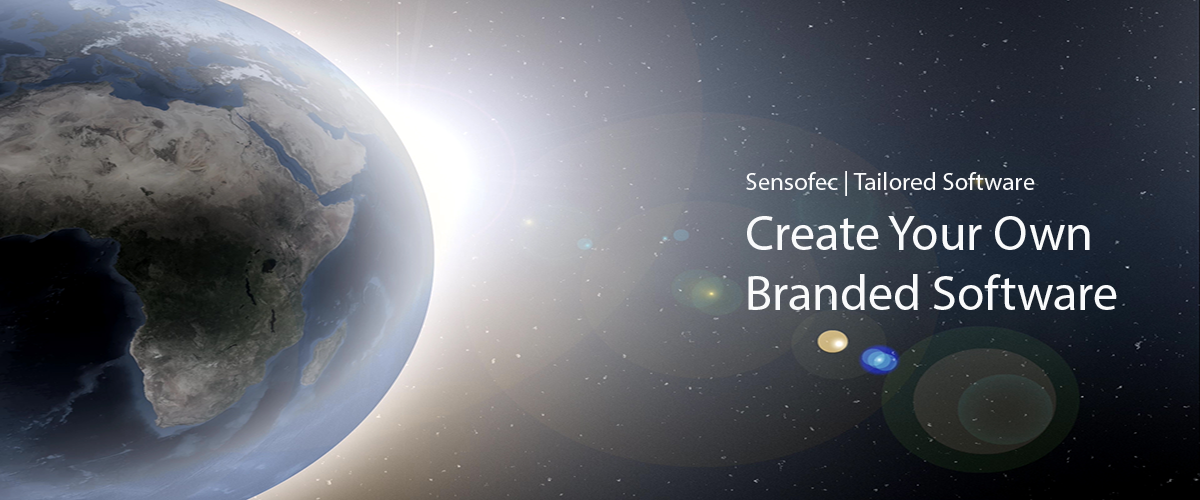
<style>
.page{position:relative;width:1200px;height:500px}
.page>*{position:absolute;margin:0}
.t1{font:50px "MyriadPro-Regular";color:#f9fafb}
.t2{font:12px "MyriadPro-Regular";color:#f9fafb}
</style>
<div class="page">
<p class="t1" style="left:746px;top:171px;width:371px;height:139px"><span class="t2">Sensofec | Tailored Software<br></span>Create Your Own <br>Branded Software</p>
</div>
